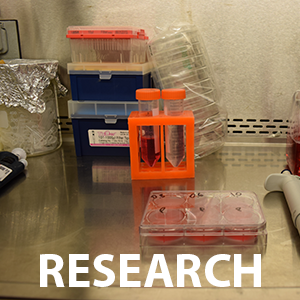
<style>
.page{position:relative;width:300px;height:300px}
.page>*{position:absolute;margin:0}
.t1{font:48px "MyriadPro-Bold";color:#ffffff}
</style>
<div class="page">
<p class="t1" style="left:40px;top:254px;width:221px;height:33px">RESEARCH</p>
</div>
